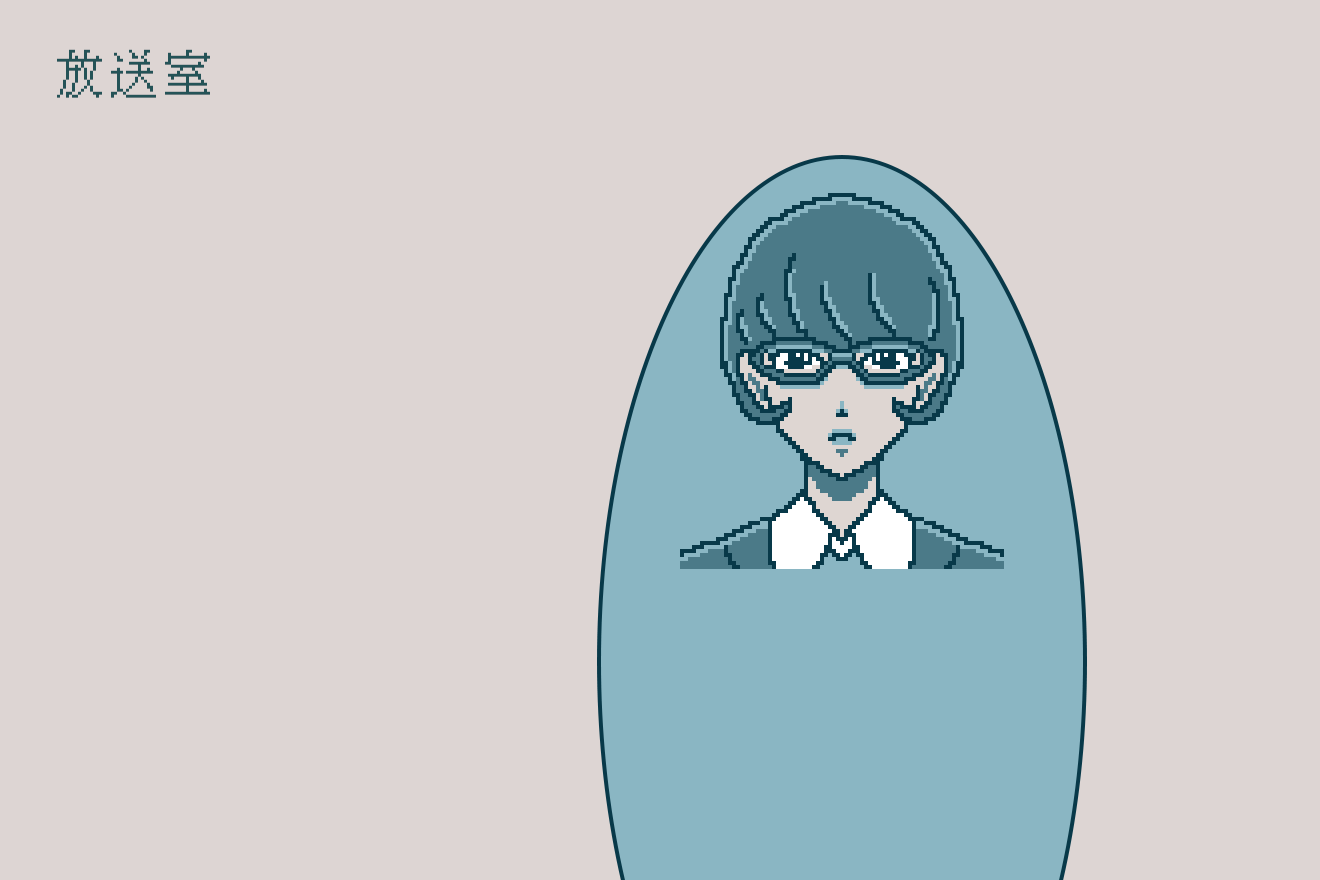
<style>
.page{position:relative;width:1320px;height:880px;background:#ddd5d3}
.page>*{position:absolute;margin:0}
.t1{font:48px "KH-Dot-kagurazaka-16";letter-spacing:0.14em;color:#1e4f5e}
</style>
<div class="page">
<p class="t1" style="left:57px;top:49px;width:153px;height:49px">放送室</p>
</div>
